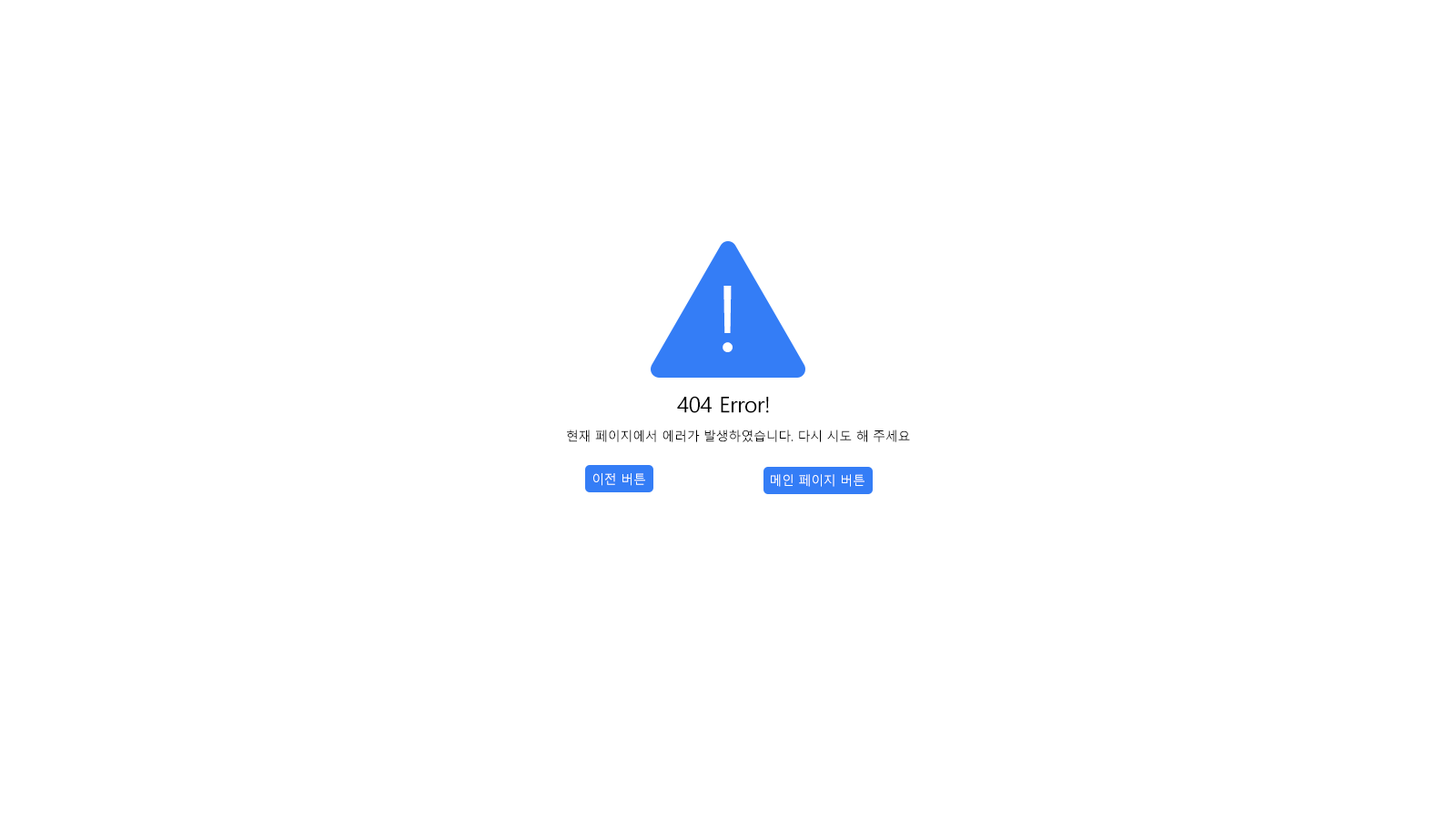
<style>
.page{position:relative;width:1456px;height:819px;background:#ffffff}
.page>*{position:absolute;margin:0}
.t1{font:91px "MalgunGothic";letter-spacing:-0.02em;color:#ffffff}
.t2{font:21.8px "MalgunGothic";letter-spacing:-0.02em;color:#000000}
.t3{font:12.7px "MalgunGothic";letter-spacing:-0.02em;color:#000000}
.t4{font:12.7px "MalgunGothic";letter-spacing:-0.02em;color:#ffffff}
</style>
<div class="page">
<p class="t1" style="left:723px;top:286px;width:10px;height:66px">!</p>
<p class="t2" style="left:677px;top:396px;width:92px;height:17px">404 Error!</p>
<p class="t3" style="left:567px;top:430px;width:343px;height:12px">현재 페이지에서 에러가 발생하였습니다. 다시 시도 해 주세요</p>
<p class="t4" style="left:593px;top:473px;width:52px;height:13px">이전 버튼</p>
<p class="t4" style="left:771px;top:474px;width:93px;height:13px">메인 페이지 버튼</p>
</div>
